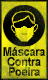
<style>
.page{position:relative;width:48px;height:80px}
.page>*{position:absolute;margin:0}
.t1{font:11.9px/10px "Arial-BoldMT";letter-spacing:-0.03em;scale:0.94 1}
</style>
<div class="page">
<p class="t1" style="left:3px;top:47px;width:42px;height:29px;text-align:center">Máscara<br>Contra<br>Poeira</p>
</div>
